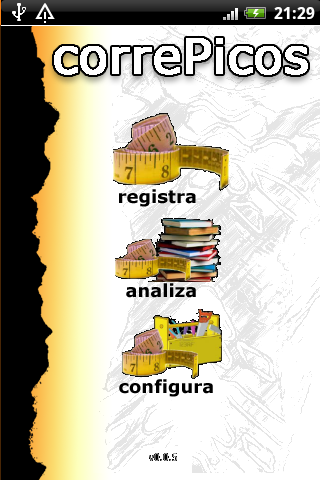
<style>
.page{position:relative;width:320px;height:480px;background:#ffffff}
.page>*{position:absolute;margin:0}
.t1{font:18px "Verdana-Bold";color:#000000}
</style>
<div class="page">
<p class="t1" style="left:119px;top:189px;width:77px;height:18px">registra</p>
<p class="t1" style="left:126px;top:283px;width:70px;height:15px">analiza</p>
<p class="t1" style="left:119px;top:379px;width:94px;height:18px">configura</p>
</div>
